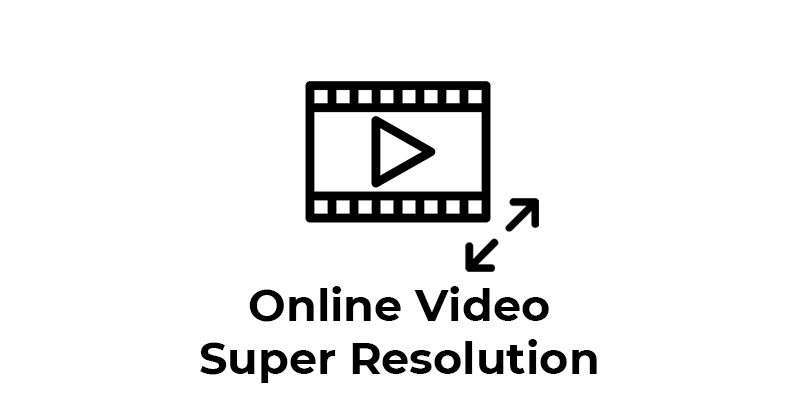
<style>
.page{position:relative;width:800px;height:420px;background:#ffffff}
.page>*{position:absolute;margin:0}
.t1{font:44.6px "Montserrat-Bold";color:#000000}
</style>
<div class="page">
<p class="t1" style="left:200px;top:286px;width:397px;height:97px;text-align:center">Online Video<br>Super Resolution</p>
</div>
